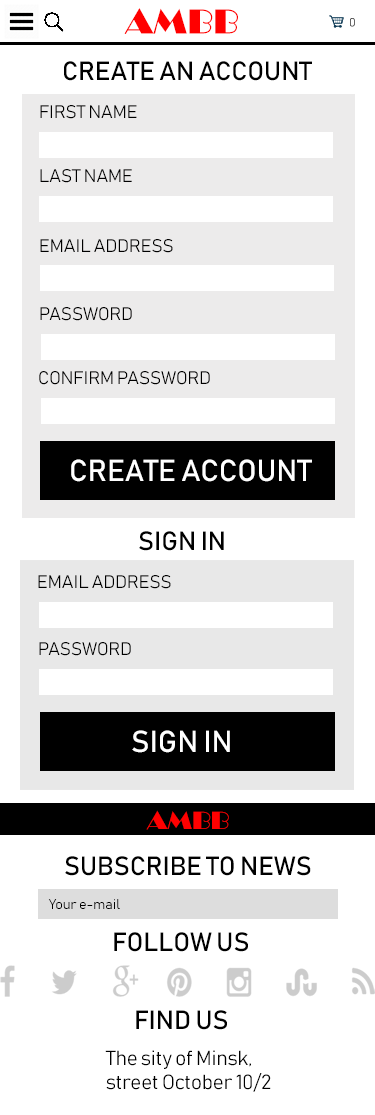
<style>
.page{position:relative;width:375px;height:1115px;background:#ffffff}
.page>*{position:absolute;margin:0}
.t1{font:36px "Broadway";color:#ff0000}
.t2{font:12px "Bahnschrift"}
.t3{font:26px "Bahnschrift";color:#000000}
.t4{font:18px "Bahnschrift";color:#000000}
.t5{font:30px "Bahnschrift";color:#ffffff}
.t6{font:26px "Broadway";color:#ff0000}
.t7{font:14px "Bahnschrift";color:#000000}
.t8{font:20px "Bahnschrift";color:#000000}
</style>
<div class="page">
<p class="t1" style="left:124px;top:8px;width:114px;height:26px">AMBB</p>
<p class="t2" style="left:350px;top:18px;width:5px;height:9px">0</p>
<p class="t3" style="left:64px;top:61px;width:248px;height:20px">CREATE AN ACCOUNT</p>
<p class="t4" style="left:40px;top:105px;width:97px;height:14px">FIRST NAME</p>
<p class="t4" style="left:40px;top:169px;width:92px;height:14px">LAST NAME</p>
<p class="t4" style="left:40px;top:239px;width:133px;height:14px">EMAIL ADDRESS</p>
<p class="t4" style="left:40px;top:307px;width:92px;height:14px">PASSWORD</p>
<p class="t4" style="left:39px;top:371px;width:171px;height:14px">CONFIRM PASSWORD</p>
<p class="t5" style="left:71px;top:459px;width:241px;height:23px">CREATE ACCOUNT</p>
<p class="t3" style="left:139px;top:531px;width:85px;height:20px">SIGN IN</p>
<p class="t4" style="left:38px;top:575px;width:133px;height:14px">EMAIL ADDRESS</p>
<p class="t4" style="left:39px;top:642px;width:92px;height:14px">PASSWORD</p>
<p class="t5" style="left:132px;top:730px;width:98px;height:23px">SIGN IN</p>
<p class="t6" style="left:146px;top:810px;width:83px;height:20px">AMBB</p>
<p class="t3" style="left:65px;top:856px;width:246px;height:20px">SUBSCRIBE TO NEWS</p>
<p class="t7" style="left:48px;top:899px;width:72px;height:10px">Your e-mail</p>
<p class="t3" style="left:114px;top:932px;width:134px;height:20px">FOLLOW US</p>
<p class="t3" style="left:136px;top:1010px;width:91px;height:20px">FIND US</p>
<p class="t8" style="left:105px;top:1050px;width:166px;height:42px">The sity of Minsk,<br>street October 10/2</p>
</div>
